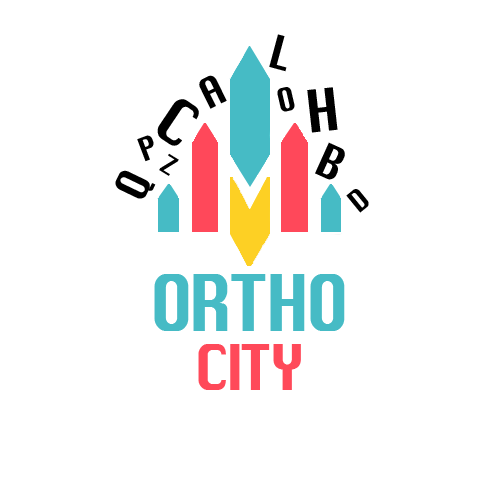
<style>
.page{position:relative;width:500px;height:500px;background:#ffffff}
.page>*{position:absolute;margin:0}
.t1{font:46.2px "ChicagoPlain";color:#000000;scale:0.9 1}
.t2{font:41.5px "ChicagoPlain";color:#000000;scale:0.9 1}
.t3{font:32.6px "ChicagoPlain";color:#000000;scale:0.9 1}
.t4{font:58.8px "ChicagoPlain";color:#000000;scale:0.9 1}
.t5{font:63px "ChicagoPlain";color:#000000;scale:0.9 1}
.t6{font:32.5px "ChicagoPlain";color:#000000;scale:0.9 1}
.t7{font:26.2px "ChicagoPlain";color:#000000;scale:0.9 1}
.t8{font:30.4px "ChicagoPlain";color:#000000;scale:0.9 1}
.t9{font:77.7px "ChicagoPlain";color:#46bbc5;scale:0.9 1}
.t10{font:63px "ChicagoPlain";color:#ff4959;scale:0.9 1}
</style>
<div class="page">
<p class="t1" style="left:269px;top:34px;width:18px;height:38px;rotate:15deg">L</p>
<p class="t2" style="left:199px;top:75px;width:28px;height:34px;rotate:-26deg">A</p>
<p class="t3" style="left:277px;top:87px;width:18px;height:25px;rotate:-13deg">O</p>
<p class="t4" style="left:307px;top:87px;width:31px;height:46px;rotate:-6deg">H</p>
<p class="t5" style="left:157px;top:99px;width:42px;height:47px;rotate:34deg">C</p>
<p class="t6" style="left:137px;top:135px;width:17px;height:27px;rotate:-21deg">P</p>
<p class="t1" style="left:315px;top:142px;width:30px;height:38px;rotate:24deg">B</p>
<p class="t7" style="left:159px;top:153px;width:20px;height:23px;rotate:31deg">Z</p>
<p class="t1" style="left:115px;top:170px;width:41px;height:29px;rotate:-64deg">Q</p>
<p class="t8" style="left:346px;top:189px;width:23px;height:24px;rotate:-39deg">D</p>
<p class="t9" style="left:154px;top:274px;width:191px;height:57px">ORTHO</p>
<p class="t10" style="left:198px;top:344px;width:103px;height:46px">CITY</p>
</div>
